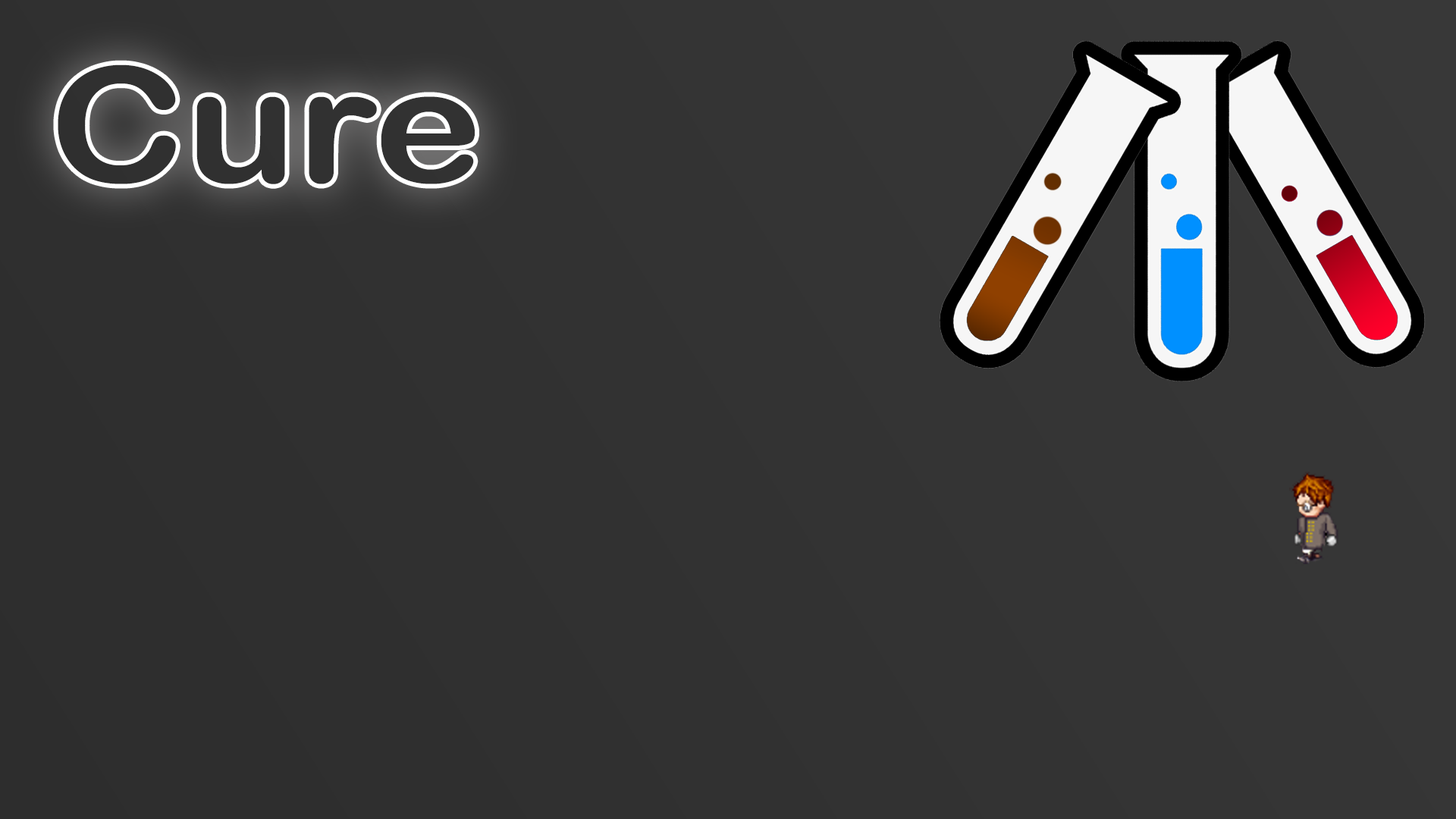
<style>
.page{position:relative;width:1456px;height:819px}
.page>*{position:absolute;margin:0}
.t1{font:160.8px "ArialRoundedMTBold";color:#303030;scale:1.15 1}
</style>
<div class="page">
<p class="t1" style="left:58px;top:64px;width:417px;height:120px">Cure</p>
</div>
